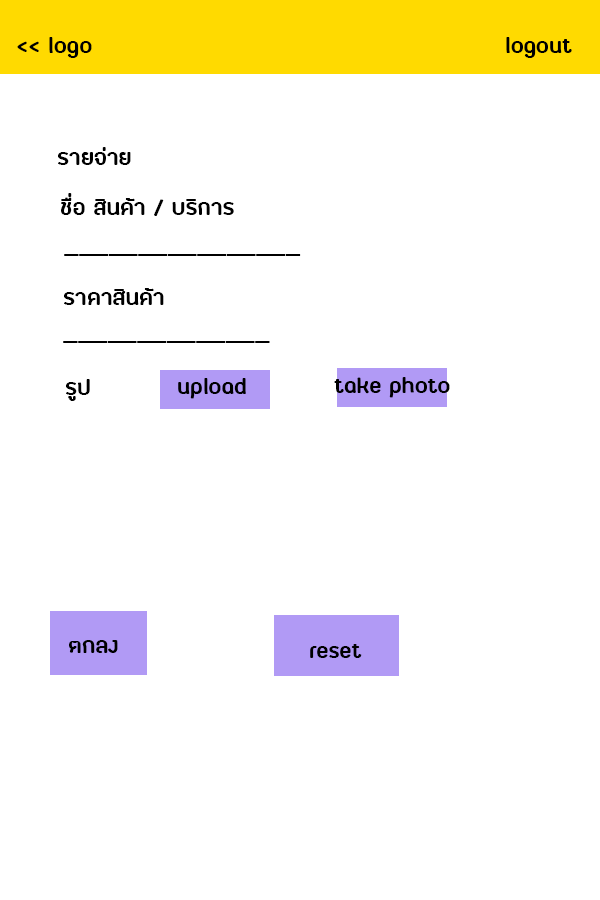
<style>
.page{position:relative;width:600px;height:900px;background:#ffffff}
.page>*{position:absolute;margin:0}
.t1{font:30px "FCLamoonBold";color:#000000}
</style>
<div class="page">
<p class="t1" style="left:17px;top:37px;width:75px;height:21px">&lt;&lt; logo</p>
<p class="t1" style="left:506px;top:37px;width:66px;height:21px">logout</p>
<p class="t1" style="left:58px;top:147px;width:73px;height:18px">รายจ่าย</p>
<p class="t1" style="left:61px;top:193px;width:173px;height:23px">ชื่อ สินค้า / บริการ</p>
<p class="t1" style="left:64px;top:254px;width:237px;height:2px">________________</p>
<p class="t1" style="left:63px;top:288px;width:207px;height:55px">ราคาสินค้า<br>______________</p>
<p class="t1" style="left:334px;top:377px;width:116px;height:21px">take photo</p>
<p class="t1" style="left:66px;top:379px;width:24px;height:22px">รูป</p>
<p class="t1" style="left:178px;top:378px;width:68px;height:21px">upload</p>
<p class="t1" style="left:69px;top:640px;width:49px;height:13px">ตกลง</p>
<p class="t1" style="left:310px;top:644px;width:52px;height:14px">reset</p>
</div>
